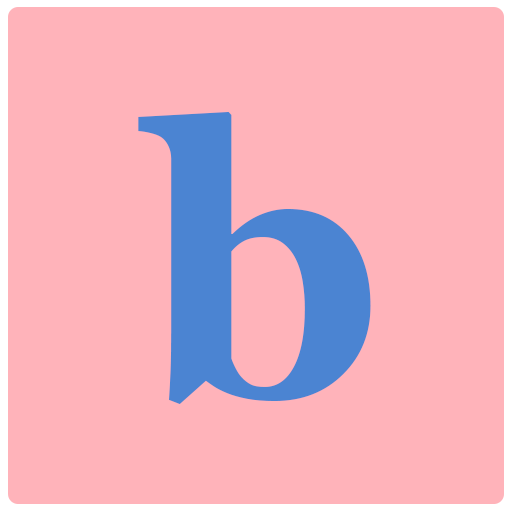
<style>
.page{position:relative;width:512px;height:512px;background:#ffb3ba}
.page>*{position:absolute;margin:0}
.t1{font:373.8px "Georgia-Bold";color:#4b84d2}
</style>
<div class="page">
<p class="t1" style="left:138px;top:112px;width:233px;height:292px">b</p>
</div>
